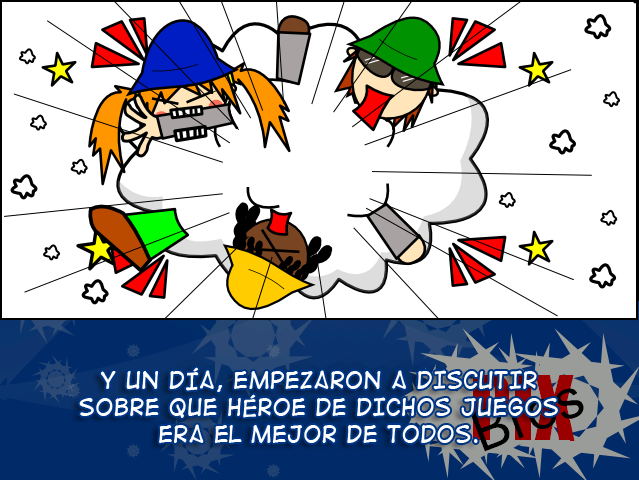
<style>
.page{position:relative;width:639px;height:480px;background:#ffffff}
.page>*{position:absolute;margin:0}
.t1{font:22.4px "DigitalStrip2";color:#ffffff}
</style>
<div class="page">
<p class="t1" style="left:79px;top:367px;width:479px;height:76px;text-align:center">Y un día, empezaron a discutir <br>sobre que héroe de dichos juegos <br>era el mejor de todos.</p>
</div>
